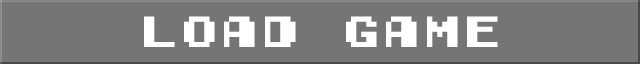
<style>
.page{position:relative;width:640px;height:64px;background:#757575}
.page>*{position:absolute;margin:0}
.t1{font:40.5px "GamegirlClassic";color:#ffffff}
</style>
<div class="page">
<p class="t1" style="left:144px;top:16px;width:354px;height:31px">LOAD GAME</p>
</div>
